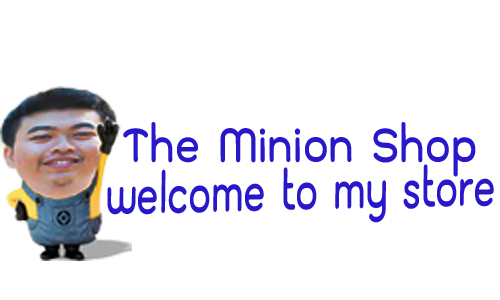
<style>
.page{position:relative;width:500px;height:300px;background:#ffffff}
.page>*{position:absolute;margin:0}
.t1{font:68.7px "THKodchasal-Bold";color:#2918c9;scale:0.84 1}
.t2{font:75.1px "THKodchasal-Bold";color:#2918c9;scale:0.68 1}
</style>
<div class="page">
<p class="t1" style="left:123px;top:122px;width:353px;height:55px">The Minion Shop</p>
<p class="t2" style="left:107px;top:164px;width:387px;height:59px;rotate:-1deg">welcome to my store</p>
</div>
